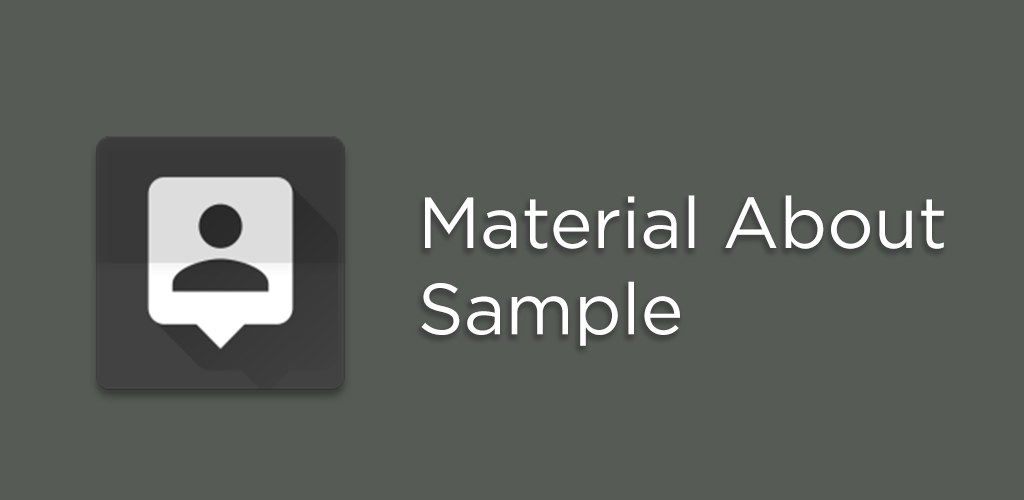
<style>
.page{position:relative;width:1024px;height:500px;background:#575b56}
.page>*{position:absolute;margin:0}
.t1{font:72px "Gotham-Book";color:#ffffff}
</style>
<div class="page">
<p class="t1" style="left:421px;top:195px;width:523px;height:151px">Material About <br>Sample</p>
</div>
